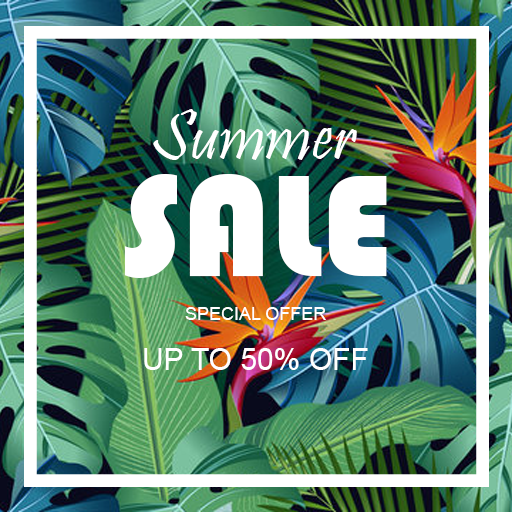
<style>
.page{position:relative;width:512px;height:512px}
.page>*{position:absolute;margin:0}
.t1{font:72px "Pristina-Regular";color:#ffffff}
.t2{font:150px "Bauhaus93";color:#ffffff}
.t3{font:18px "ArialMT";color:#ffffff}
.t4{font:30px "ArialMT";color:#ffffff}
</style>
<div class="page">
<p class="t1" style="left:153px;top:109px;width:204px;height:51px">Summer</p>
<p class="t2" style="left:124px;top:174px;width:263px;height:104px">SALE</p>
<p class="t3" style="left:185px;top:307px;width:141px;height:13px">SPECIAL OFFER</p>
<p class="t4" style="left:144px;top:348px;width:224px;height:22px">UP TO 50% OFF</p>
</div>
